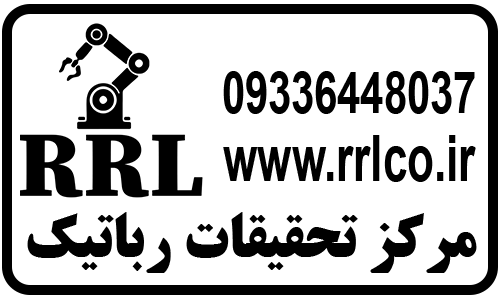
<style>
.page{position:relative;width:500px;height:300px;background:#ffffff}
.page>*{position:absolute;margin:0}
.t1{font:59.1px "Arial-BoldMT";color:#000000;scale:0.7 1}
.t2{font:64.3px "Arial-BoldMT";color:#000000;scale:0.68 1}
.t3{font:61.1px "BTitrBold";color:#000000}
</style>
<div class="page">
<p class="t1" style="left:223px;top:71px;width:252px;height:43px">09336448037</p>
<p class="t2" style="left:223px;top:135px;width:253px;height:47px">www.rrlco.ir</p>
<p class="t3" style="left:27px;top:212px;width:450px;height:61px">مرکز تحقیقات رباتیک</p>
</div>
